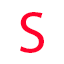
<style>
.page{position:relative;width:64px;height:64px;background:#ffffff}
.page>*{position:absolute;margin:0}
.t1{font:60px "MyriadPro-Regular";color:#ff022c}
</style>
<div class="page">
<p class="t1" style="left:20px;top:12px;width:24px;height:41px">S</p>
</div>
